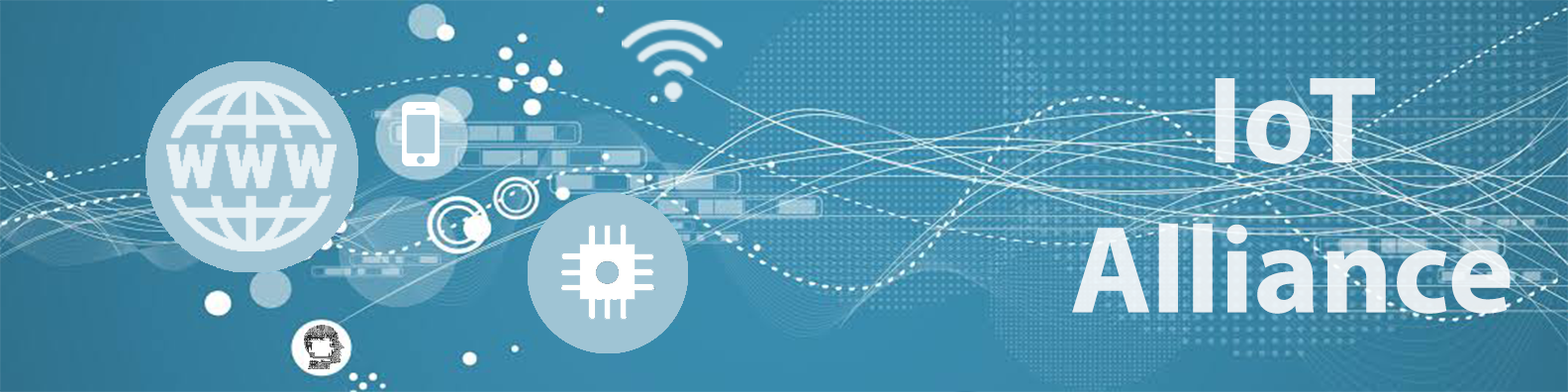
<style>
.page{position:relative;width:1568px;height:392px}
.page>*{position:absolute;margin:0}
.t1{font:124.7px "MyriadPro-Bold";color:#e6eef2}
</style>
<div class="page">
<p class="t1" style="left:1072px;top:78px;width:439px;height:236px;text-align:center">IoT<br>Alliance</p>
</div>
